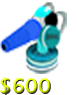
<style>
.page{position:relative;width:77px;height:95px;background:#ffffff}
.page>*{position:absolute;margin:0}
.t1{font:21.5px "LucidaConsole"}
</style>
<div class="page">
<p class="t1" style="left:0px;top:77px;width:50px;height:17px">$600</p>
</div>
